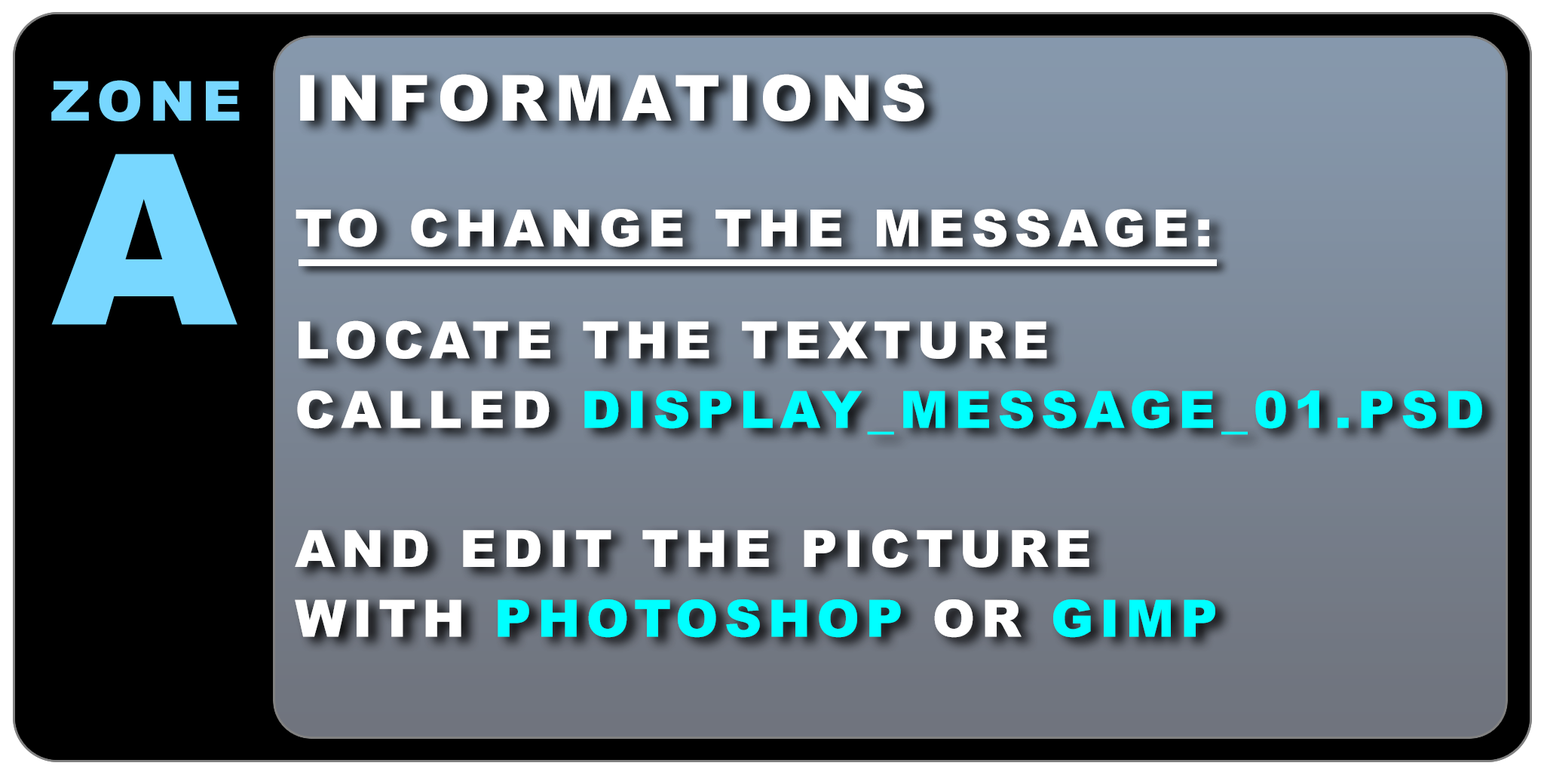
<style>
.page{position:relative;width:1544px;height:772px}
.page>*{position:absolute;margin:0}
.t1{font:51.4px/56px "Arial-Black";letter-spacing:0.12em;color:#ffffff}
.t2{font:63.3px/69.6px "Arial-Black";letter-spacing:0.12em;color:#ffffff}
.t3{font:56.7px/69.6px "Arial-Black";letter-spacing:0.12em;color:#ffffff}
.t4{font:51.4px/69.6px "Arial-Black";letter-spacing:0.12em;color:#ffffff}
.t5{font:51.4px/69.6px "Arial-Black";letter-spacing:0.12em;color:#00ffff}
.t6{font:55.1px "Arial-Black";letter-spacing:0.12em;color:#78d7ff}
.t7{font:237.4px "Arial-Black";letter-spacing:0.12em;color:#78d7ff}
</style>
<div class="page">
<p class="t1" style="left:295px;top:74px;width:1187px;height:564px"><span class="t2">INFORMATIONS<br></span><span class="t3"><br></span>TO CHANGE THE MESSAGE:<br><br>LOCATE THE TEXTURE<br><span class="t4">CALLED </span><span class="t5">DISPLAY_MESSAGE_01.PSD<br></span><span class="t4"><br>AND EDIT THE PICTURE<br>WITH </span><span class="t5">PHOTOSHOP</span><span class="t4"> OR </span><span class="t5">GIMP</span></p>
<p class="t6" style="left:51px;top:80px;width:189px;height:41px">ZONE</p>
<p class="t7" style="left:51px;top:154px;width:187px;height:171px">A</p>
</div>
